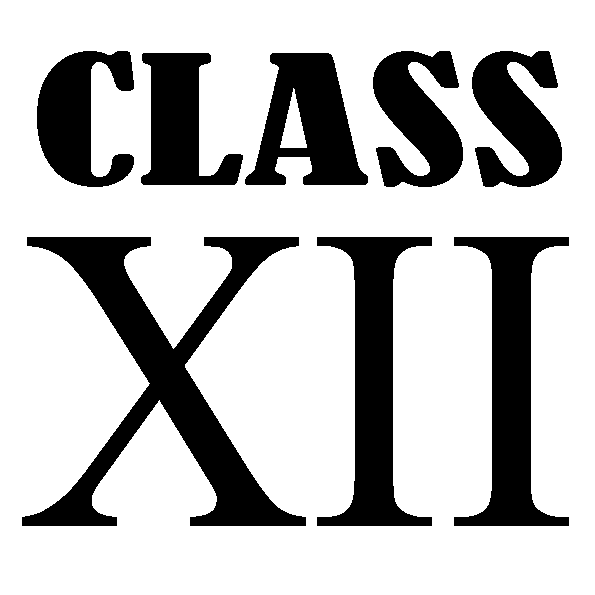
<style>
.page{position:relative;width:595px;height:595px;background:#ffffff}
.page>*{position:absolute;margin:0}
.t1{font:168px "BernardMT-Condensed";color:#000000;scale:1.58 1}
.t2{font:434.1px "MongolianBaiti";color:#000000;scale:0.93 1}
</style>
<div class="page">
<p class="t1" style="left:37px;top:51px;width:525px;height:136px">CLASS</p>
<p class="t2" style="left:22px;top:237px;width:547px;height:289px">XII</p>
</div>
